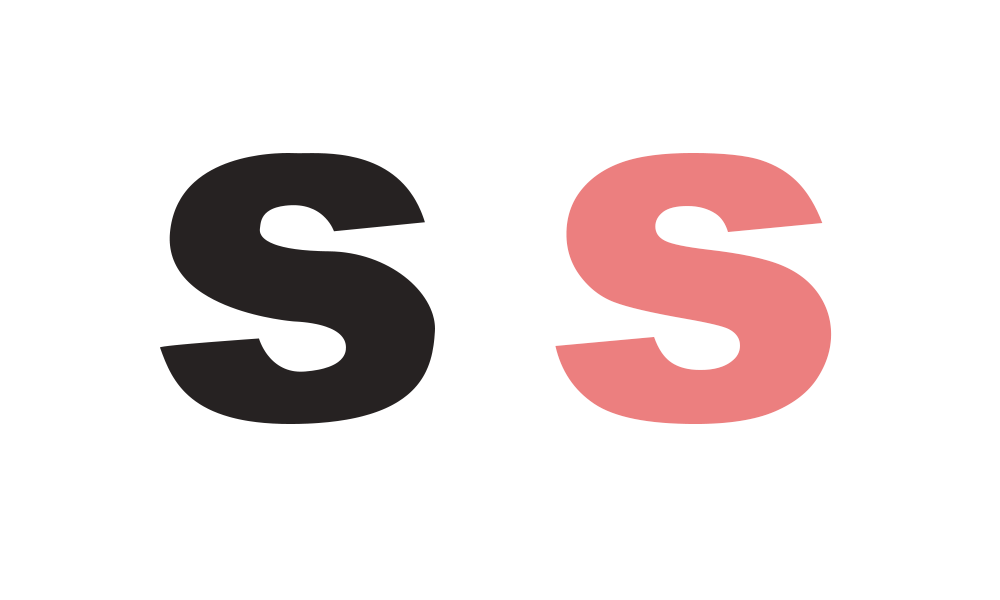
<style>
.page{position:relative;width:1000px;height:600px;background:#ffffff}
.page>*{position:absolute;margin:0}
.t1{font:500px "Arial-Black";color:#ec7f7f}
</style>
<div class="page">
<p class="t1" style="left:555px;top:153px;width:277px;height:271px">s</p>
</div>
